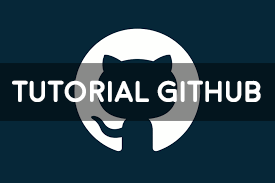
<style>
.page{position:relative;width:275px;height:183px;background:#062738}
.page>*{position:absolute;margin:0}
.t1{font:30px "Moon-Bold";color:#ffffff}
</style>
<div class="page">
<p class="t1" style="left:12px;top:80px;width:249px;height:22px">TUTORIAL GITHUB</p>
</div>
